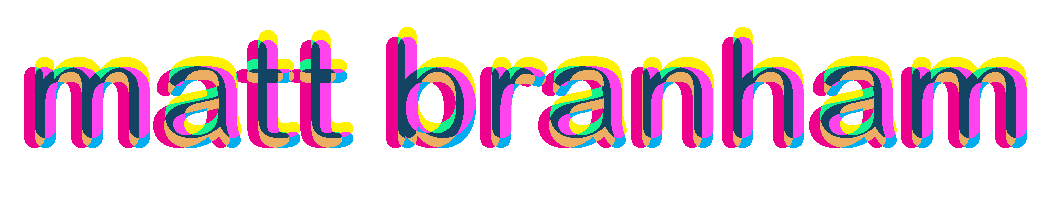
<style>
.page{position:relative;width:1064px;height:200px;background:#ffffff}
.page>*{position:absolute;margin:0}
.t1{font:150px "ArialRoundedMTBold"}
</style>
<div class="page">
<p class="t1" style="left:35px;top:27px;width:992px;height:111px">matt branham</p>
<p class="t1" style="left:24px;top:37px;width:992px;height:111px">matt branham</p>
<p class="t1" style="left:35px;top:37px;width:992px;height:111px">matt branham</p>
</div>
